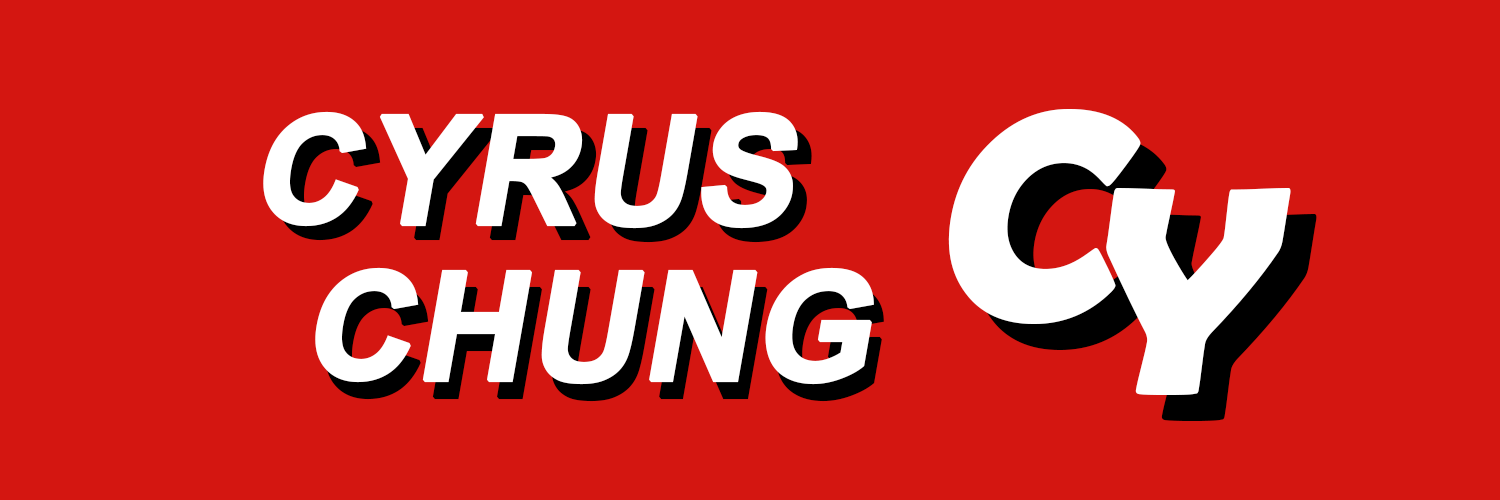
<style>
.page{position:relative;width:1500px;height:500px;background:#d41611}
.page>*{position:absolute;margin:0}
.t1{font:150px "Arial-BoldMT";color:#ffffff;font-weight:bold;font-style:italic}
.t2{font:300px/75px "BerlinSansFBDemi-Bold";color:#ffffff;font-style:italic}
.t3{font:150px "Arial-BoldMT";font-weight:bold;font-style:italic}
.t4{font:300px/75px "BerlinSansFBDemi-Bold";font-style:italic}
</style>
<div class="page">
<p class="t1" style="left:263px;top:111px;width:535px;height:118px">CYRUS</p>
<p class="t2" style="left:948px;top:109px;width:343px;height:286px">C<br>  Y</p>
<p class="t3" style="left:277px;top:125px;width:535px;height:118px">CYRUS</p>
<p class="t4" style="left:974px;top:135px;width:343px;height:286px">C<br>  Y</p>
<p class="t1" style="left:315px;top:267px;width:559px;height:118px">CHUNG</p>
<p class="t3" style="left:325px;top:284px;width:559px;height:118px">CHUNG</p>
</div>
